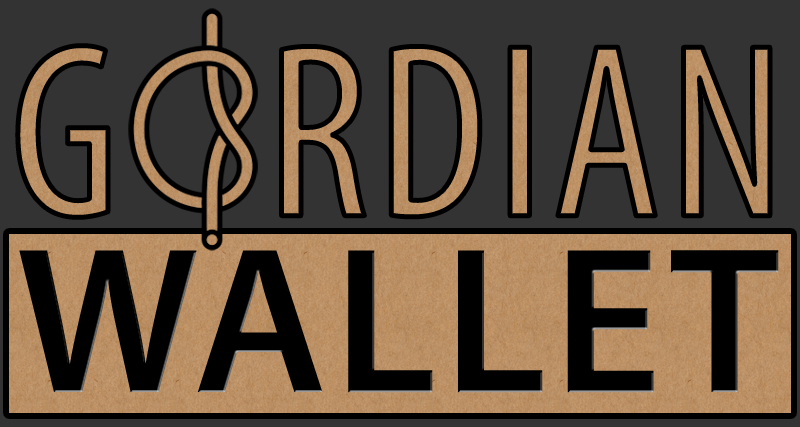
<style>
.page{position:relative;width:800px;height:427px;background:#333333}
.page>*{position:absolute;margin:0}
.t1{font:250px "MyriadPro-Cond";letter-spacing:0.03em;color:#ba8e61}
.t2{font:210px "MyriadPro-Semibold";letter-spacing:0.03em;color:#000000}
</style>
<div class="page">
<p class="t1" style="left:17px;top:45px;width:753px;height:173px">G   RDIAN</p>
<p class="t2" style="left:19px;top:250px;width:760px;height:143px">WALLET</p>
</div>
